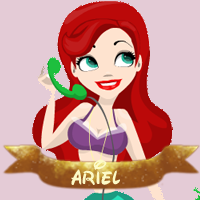
<style>
.page{position:relative;width:200px;height:200px;background:#e4cbd6}
.page>*{position:absolute;margin:0}
.t1{font:37.4px "Waltograph";color:#fcfac7}
</style>
<div class="page">
<p class="t1" style="left:71px;top:159px;width:49px;height:26px">ariel</p>
</div>
